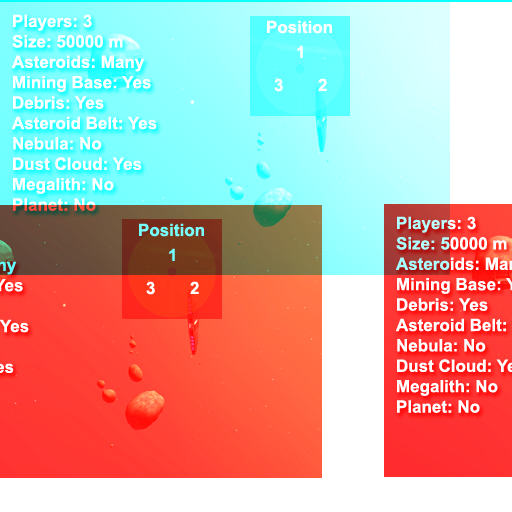
<style>
.page{position:relative;width:512px;height:512px}
.page>*{position:absolute;margin:0}
.t1{font:17px "Arial-BoldMT"}
.t2{font:17px "Arial-BoldMT";color:#ffffff}
</style>
<div class="page">
<p class="t1" style="left:12px;top:12px;width:145px;height:197px">Players: 3<br>Size: 50000 m<br>Asteroids: Many<br>Mining Base: Yes<br>Debris: Yes<br>Asteroid Belt: Yes<br>Nebula: No<br>Dust Cloud: Yes<br>Megalith: No<br>Planet: No</p>
<p class="t1" style="left:267px;top:18px;width:65px;height:14px">Position</p>
<p class="t2" style="left:297px;top:43px;width:6px;height:13px">1</p>
</div>
